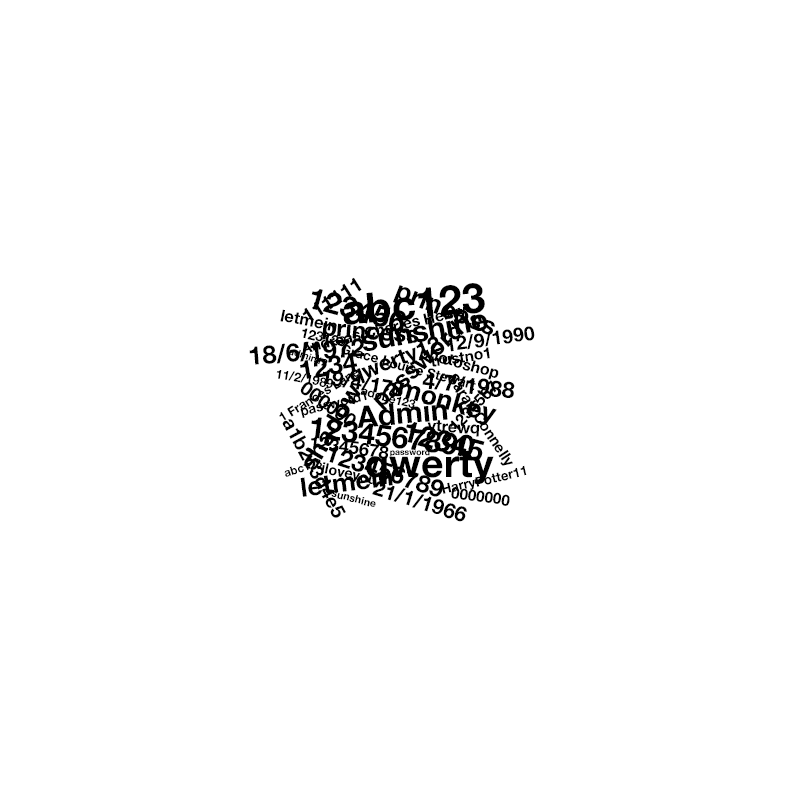
<style>
.page{position:relative;width:800px;height:800px;background:#ffffff}
.page>*{position:absolute;margin:0}
.t1{font:20.3px "HelveticaNeue-Bold";color:#000000}
.t2{font:30px "HelveticaNeue-Bold";color:#000000}
.t3{font:42px "HelveticaNeue-Bold";color:#000000}
.t4{font:26px "HelveticaNeue-Bold";color:#000000}
.t5{font:16.5px "HelveticaNeue-Bold";color:#000000}
.t6{font:13.8px "HelveticaNeue-Bold";color:#000000}
.t7{font:24px "HelveticaNeue-Bold";color:#000000}
.t8{font:19.4px "HelveticaNeue-Bold";color:#000000}
.t9{font:25.3px "HelveticaNeue-Bold";color:#000000}
.t10{font:21.9px "HelveticaNeue-Bold";color:#000000}
.t11{font:9.9px "HelveticaNeue-Bold";color:#000000}
.t12{font:26.4px "HelveticaNeue-Bold";color:#000000}
.t13{font:16px "HelveticaNeue-Bold";color:#000000}
.t14{font:15.4px "HelveticaNeue-Bold";color:#000000}
.t15{font:12.7px "HelveticaNeue-Bold";color:#000000}
.t16{font:20.5px "HelveticaNeue-Bold";color:#000000}
.t17{font:22.8px "HelveticaNeue-Bold";color:#000000}
.t18{font:13.4px "HelveticaNeue-Bold";color:#000000}
.t19{font:19px "HelveticaNeue-Bold";color:#000000}
.t20{font:25.6px "HelveticaNeue-Bold";color:#000000}
.t21{font:12px "HelveticaNeue-Bold";color:#000000}
.t22{font:26.7px "HelveticaNeue-Bold";color:#000000}
.t23{font:16.2px "HelveticaNeue-Bold";color:#000000}
.t24{font:18px "HelveticaNeue-Bold";color:#000000}
.t25{font:24.5px "HelveticaNeue-Bold";color:#000000}
.t26{font:8.6px "HelveticaNeue-Bold";color:#000000}
.t27{font:11.3px "HelveticaNeue-Bold";color:#000000}
.t28{font:39.1px "HelveticaNeue-Bold";color:#000000}
.t29{font:26.5px "HelveticaNeue-Bold";color:#000000}
.t30{font:13.2px "HelveticaNeue-Bold";color:#000000}
.t31{font:20.8px "HelveticaNeue-Bold";color:#000000}
.t32{font:10.7px "HelveticaNeue-Bold";color:#000000}
.t33{font:15.2px "HelveticaNeue-Bold";color:#000000}
</style>
<div class="page">
<p class="t1" style="left:302px;top:277px;width:60px;height:45px;rotate:-32deg">111111</p>
<p class="t2" style="left:311px;top:289px;width:95px;height:43px;rotate:15deg">123456</p>
<p class="t3" style="left:343px;top:283px;width:142px;height:42px;rotate:-5deg">abc123</p>
<p class="t4" style="left:393px;top:285px;width:102px;height:50px;rotate:22deg">princess</p>
<p class="t5" style="left:280px;top:309px;width:57px;height:23px;rotate:12deg">letmein</p>
<p class="t2" style="left:362px;top:314px;width:126px;height:37px;rotate:-10deg">sunshine</p>
<p class="t6" style="left:302px;top:328px;width:44px;height:19px;rotate:13deg">123123</p>
<p class="t7" style="left:322px;top:320px;width:97px;height:23px;rotate:5deg">princess</p>
<p class="t8" style="left:446px;top:326px;width:89px;height:26px;rotate:-8deg">12/9/1990</p>
<p class="t9" style="left:249px;top:338px;width:116px;height:27px;rotate:-5deg">18/6/1972</p>
<p class="t10" style="left:350px;top:336px;width:92px;height:48px;rotate:-21deg">qwerty12</p>
<p class="t11" style="left:288px;top:349px;width:40px;height:18px;rotate:18deg">admin12</p>
<p class="t12" style="left:300px;top:352px;width:58px;height:27px;rotate:-10deg">1234</p>
<p class="t13" style="left:418px;top:348px;width:81px;height:32px;rotate:16deg">photoshop</p>
<p class="t14" style="left:430px;top:347px;width:60px;height:20px;rotate:-8deg">trustno1</p>
<p class="t15" style="left:276px;top:370px;width:58px;height:18px;rotate:10deg">11/2/1989</p>
<p class="t16" style="left:322px;top:369px;width:81px;height:28px;rotate:10deg">19/4/178</p>
<p class="t17" style="left:422px;top:373px;width:93px;height:25px;rotate:7deg">4/7/1988</p>
<p class="t18" style="left:300px;top:390px;width:67px;height:28px;rotate:-14deg">password1</p>
<p class="t19" style="left:300px;top:382px;width:56px;height:45px;rotate:36deg">000000</p>
<p class="t20" style="left:304px;top:383px;width:57px;height:87px;rotate:-59deg">shadow</p>
<p class="t21" style="left:361px;top:388px;width:55px;height:20px;rotate:15deg">adobe123</p>
<p class="t22" style="left:397px;top:382px;width:100px;height:43px;rotate:16deg">monkey</p>
<p class="t23" style="left:450px;top:380px;width:47px;height:50px;rotate:-46deg">1234567</p>
<p class="t2" style="left:357px;top:400px;width:91px;height:28px;rotate:-5deg">Admin</p>
<p class="t8" style="left:282px;top:419px;width:64px;height:99px;rotate:62deg">a1b2c3d4e5</p>
<p class="t2" style="left:311px;top:417px;width:163px;height:40px;rotate:7deg">1234567890</p>
<p class="t2" style="left:406px;top:422px;width:79px;height:39px;rotate:15deg">12345</p>
<p class="t23" style="left:427px;top:420px;width:53px;height:17px;rotate:3deg">ytrewq</p>
<p class="t24" style="left:311px;top:436px;width:78px;height:23px;rotate:8deg">12345678</p>
<p class="t25" style="left:328px;top:445px;width:116px;height:52px;rotate:18deg">123456789</p>
<p class="t26" style="left:390px;top:449px;width:40px;height:8px">password</p>
<p class="t27" style="left:284px;top:459px;width:38px;height:18px;rotate:-17deg">abc123</p>
<p class="t28" style="left:366px;top:450px;width:128px;height:34px">qwerty</p>
<p class="t29" style="left:300px;top:468px;width:93px;height:29px;rotate:-7deg">letmein</p>
<p class="t30" style="left:441px;top:465px;width:86px;height:29px;rotate:-13deg">HarryPotter11</p>
<p class="t31" style="left:372px;top:481px;width:95px;height:41px;rotate:17deg">21/1/1966</p>
<p class="t32" style="left:331px;top:491px;width:45px;height:16px;rotate:14deg">sunshine</p>
<p class="t33" style="left:451px;top:487px;width:59px;height:19px;rotate:8deg">0000000</p>
</div>
